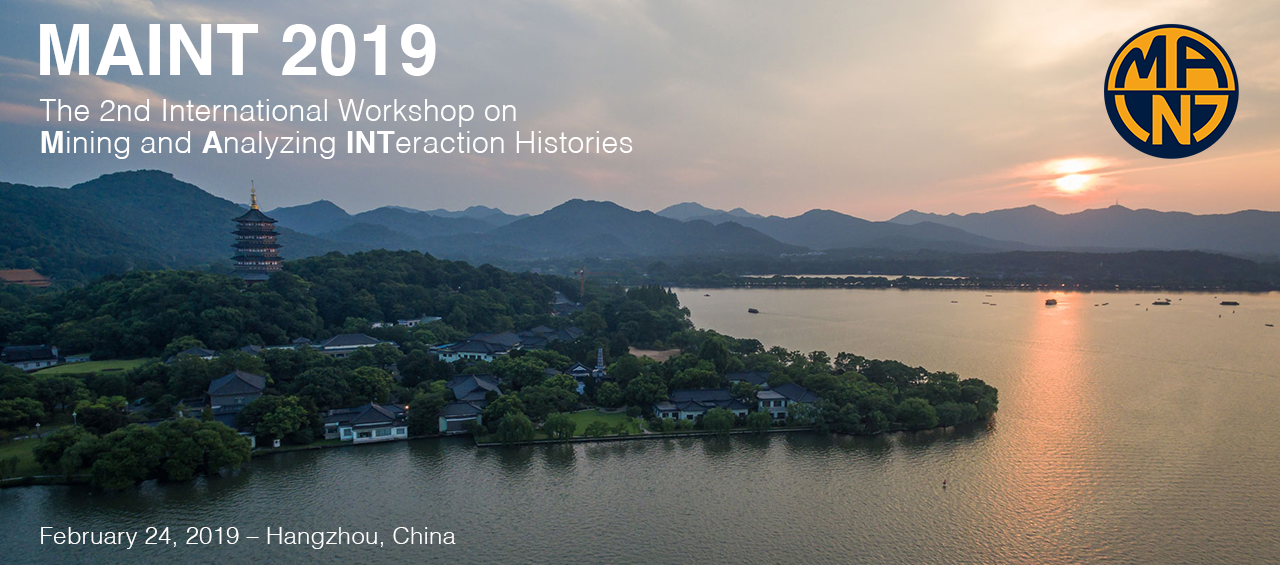
<style>
.page{position:relative;width:1280px;height:565px}
.page>*{position:absolute;margin:0}
.t1{font:70px "Helvetica-Bold";letter-spacing:0.01em;color:#ffffff}
.t2{font:30px/30px "Helvetica-Light";letter-spacing:0.01em;color:#ffffff}
.t3{font:30px/30px "Helvetica-Bold";letter-spacing:0.01em;color:#ffffff}
.t4{font:24px "Helvetica-Light";letter-spacing:0.01em;color:#ffffff}
</style>
<div class="page">
<p class="t1" style="left:40px;top:24px;width:396px;height:52px">MAINT 2019</p>
<p class="t2" style="left:39px;top:99px;width:594px;height:60px">The 2nd International Workshop on<br><span class="t3">M</span>ining and <span class="t3">A</span>nalyzing <span class="t3">INT</span>eraction Histories</p>
<p class="t4" style="left:41px;top:527px;width:415px;height:22px">February 24, 2019 – Hangzhou, China</p>
</div>
